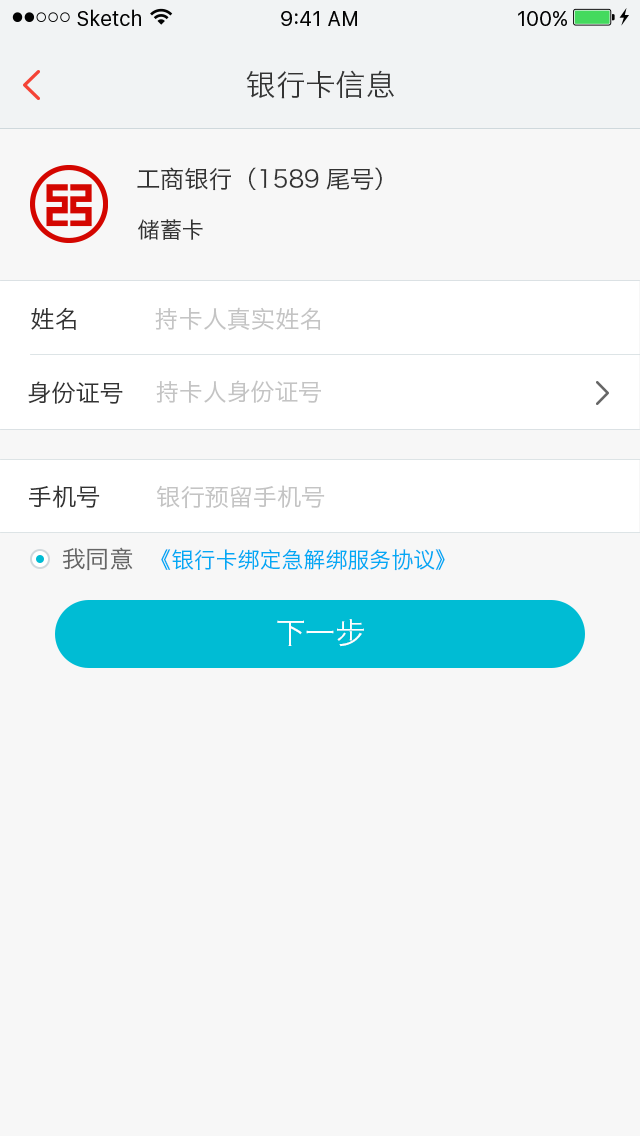
<style>
.page{position:relative;width:640px;height:1136px;background:#f7f7f7}
.page>*{position:absolute;margin:0}
.t1{font:30px "HiraginoSansGB-W3";color:#333333}
.t2{font:24px "HiraginoSansGB-W3";color:#333333}
.t3{font:22px "HiraginoSansGB-W3";color:#333333}
.t4{font:24px "HiraginoSansGB-W3";color:#c4c4c4}
.t5{font:24.2px "HiraginoSansGB-W3";color:#333333}
.t6{font:22.1px "HiraginoSansGB-W3";color:#03a9f4}
.t7{font:24.1px "HiraginoSansGB-W3";color:#666666}
.t8{font:30px "HiraginoSansGB-W3";color:#fffefe}
</style>
<div class="page">
<p class="t1" style="left:246px;top:70px;width:148px;height:29px">银行卡信息</p>
<p class="t2" style="left:137px;top:167px;width:245px;height:24px">工商银行（1589尾号）</p>
<p class="t3" style="left:138px;top:219px;width:65px;height:21px">储蓄卡</p>
<p class="t2" style="left:31px;top:307px;width:45px;height:23px">姓名</p>
<p class="t4" style="left:155px;top:307px;width:166px;height:24px">持卡人真实姓名</p>
<p class="t2" style="left:28px;top:381px;width:95px;height:23px">身份证号</p>
<p class="t4" style="left:156px;top:380px;width:165px;height:23px">持卡人身份证号</p>
<p class="t5" style="left:29px;top:485px;width:71px;height:23px">手机号</p>
<p class="t4" style="left:156px;top:485px;width:169px;height:24px">银行预留手机号</p>
<p class="t6" style="left:63px;top:547px;width:382px;height:24px"><span class="t7">我同意  </span>《银行卡绑定急解绑服务协议》</p>
<p class="t8" style="left:277px;top:619px;width:87px;height:28px">下一步</p>
</div>
